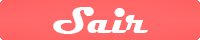
<style>
.page{position:relative;width:200px;height:40px}
.page>*{position:absolute;margin:0}
.t1{font:37.5px "Magneto-Bold";color:#ffffff}
</style>
<div class="page">
<p class="t1" style="left:53px;top:7px;width:95px;height:27px">Sair</p>
</div>
